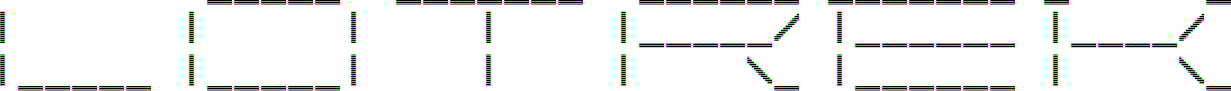
<style>
.page{position:relative;width:1231px;height:91px;background:#ffffff}
.page>*{position:absolute;margin:0}
.t1{font:36px "Terminal"}
</style>
<div class="page">
<p class="t1" style="left:0px;top:0px;width:1231px;height:91px;text-align:center">_____  _______  ______ _______ _     _<br> |      |     |    |    |_____/ |______ |____/ <br> |_____ |_____|    |    |    \_ |______ |    \_</p>
</div>
